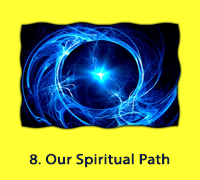
<style>
.page{position:relative;width:200px;height:180px;background:#ffff33}
.page>*{position:absolute;margin:0}
.t1{font:14.4px "MyriadPro-Regular";color:#101f3d;font-weight:bold;scale:1.11 1}
</style>
<div class="page">
<p class="t1" style="left:29px;top:153px;width:141px;height:15px">8. Our Spiritual Path</p>
</div>
